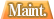
<style>
.page{position:relative;width:54px;height:19px}
.page>*{position:absolute;margin:0}
.t1{font:16px "RyuminPro-ExBold";letter-spacing:-0.08em;color:#ffffff;scale:0.9 1}
</style>
<div class="page">
<p class="t1" style="left:9px;top:4px;width:37px;height:12px">Maint.</p>
</div>
